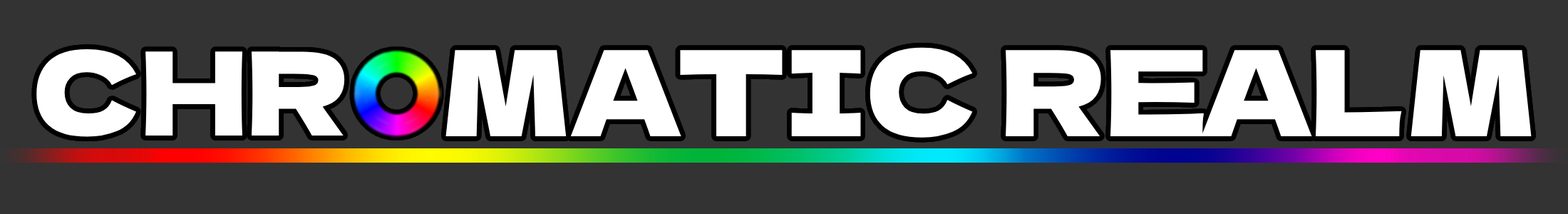
<style>
.page{position:relative;width:1568px;height:214px;background:#333333}
.page>*{position:absolute;margin:0}
.t1{font:115.6px "DelaGothicOne-Regular";color:#ffffff}
.t2{font:118.6px "DelaGothicOne-Regular";color:#ffffff}
</style>
<div class="page">
<p class="t1" style="left:36px;top:49px;width:309px;height:88px">CHR</p>
<p class="t2" style="left:445px;top:47px;width:1087px;height:91px">MATIC REALM</p>
</div>
